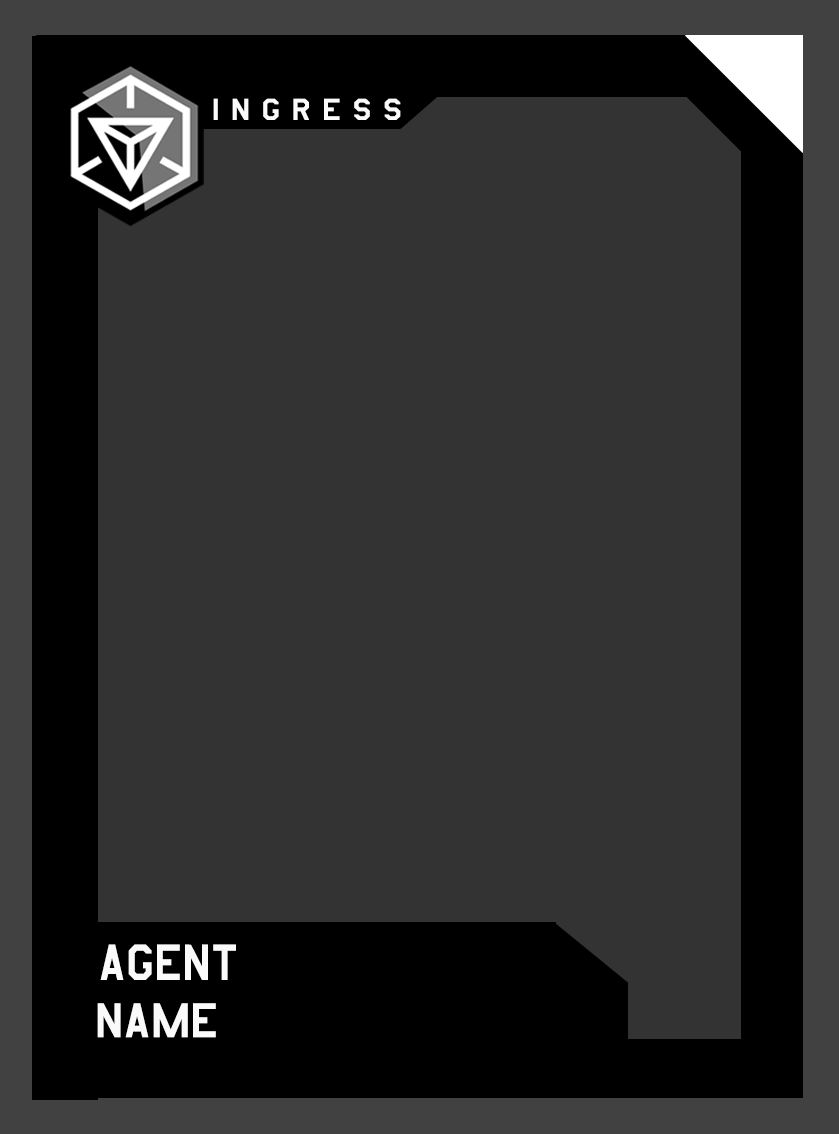
<style>
.page{position:relative;width:839px;height:1134px;background:#333333}
.page>*{position:absolute;margin:0}
.t1{font:34.7px "AmarilloUSAF";color:#fafafa;scale:1.09 1}
.t2{font:58.6px "AmarilloUSAF";color:#fafafa;scale:0.96 1}
.t3{font:56.4px "AmarilloUSAF";color:#fafafa}
</style>
<div class="page">
<p class="t1" style="left:213px;top:98px;width:188px;height:22px">i n g r e s s</p>
<p class="t2" style="left:100px;top:944px;width:136px;height:36px">AGENT</p>
<p class="t3" style="left:97px;top:1003px;width:119px;height:35px">NAME</p>
</div>
